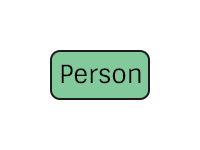
<style>
.page{position:relative;width:200px;height:150px;background:#ffffff}
.page>*{position:absolute;margin:0}
.t1{font:25px "Sintony";color:#000000}
</style>
<div class="page">
<p class="t1" style="left:61px;top:64px;width:80px;height:20px">Person</p>
</div>
